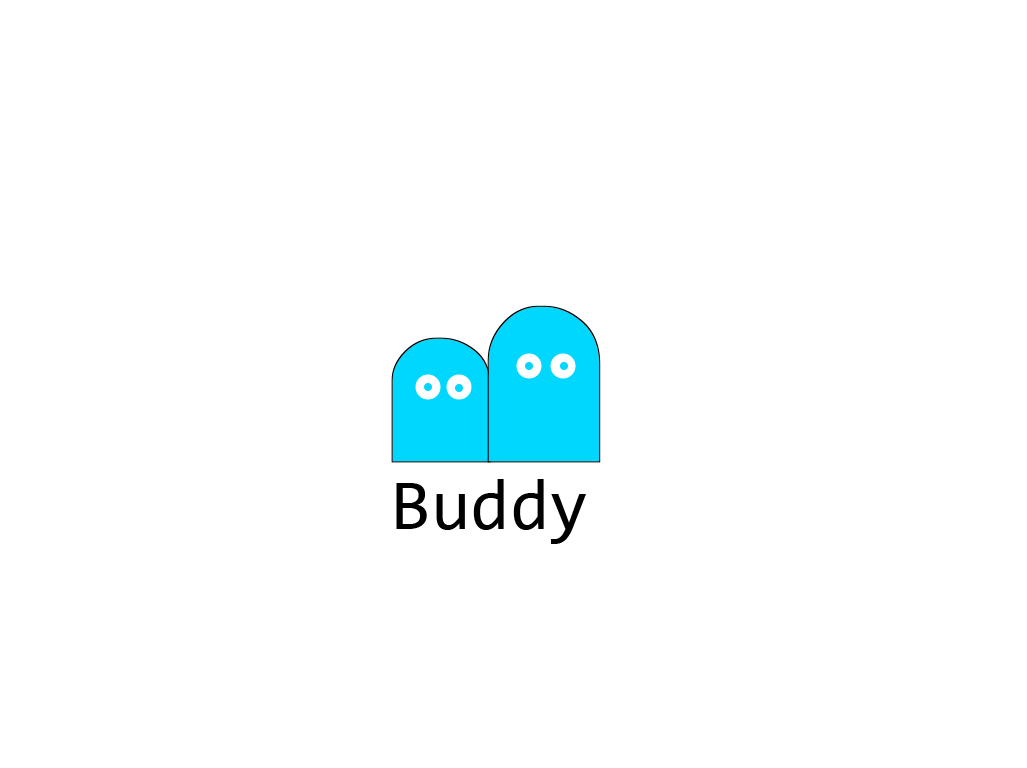
<style>
.page{position:relative;width:1027px;height:768px;background:#ffffff}
.page>*{position:absolute;margin:0}
.t1{font:72px "Consolas";color:#000000}
</style>
<div class="page">
<p class="t1" style="left:396px;top:479px;width:190px;height:65px">Buddy</p>
</div>
